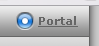
<style>
.page{position:relative;width:99px;height:46px}
.page>*{position:absolute;margin:0}
.t1{font:11px "Verdana-Bold";color:#666666;text-decoration:underline}
</style>
<div class="page">
<p class="t1" style="left:38px;top:16px;width:40px;height:11px">Portal</p>
</div>
